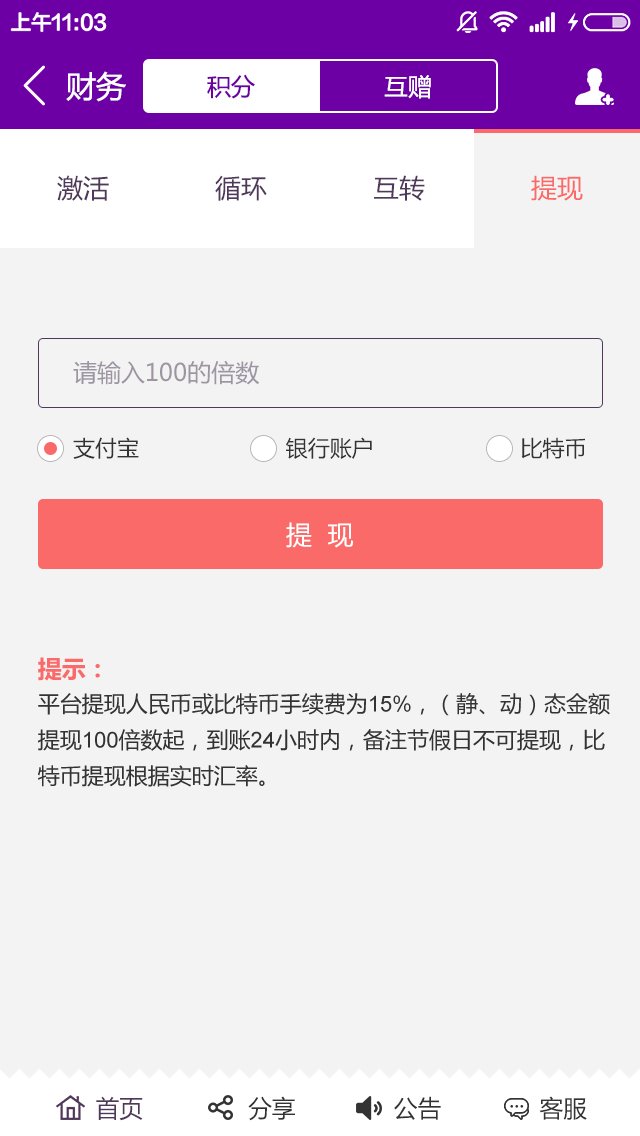
<style>
.page{position:relative;width:640px;height:1136px;background:#f3f3f3}
.page>*{position:absolute;margin:0}
.t1{font:30px "MicrosoftYaHei";color:#ffffff}
.t2{font:24px "MicrosoftYaHei";color:#6d00a5}
.t3{font:24px "MicrosoftYaHei";color:#ffffff}
.t4{font:26px "MicrosoftYaHei";color:#50385b}
.t5{font:26px "MicrosoftYaHei";color:#f96a69}
.t6{font:24px "MicrosoftYaHei";color:#9e95a2}
.t7{font:22px "MicrosoftYaHei";color:#333333}
.t8{font:26px "MicrosoftYaHei";color:#ffffff}
.t9{font:22px/36px "MicrosoftYaHei";color:#333333}
.t10{font:24px/36px "Î¢ÈíÑÅºÚ83¹«ÉçÌØ±ð°æ\BBS.83GS.CN-B";color:#f96a69}
.t11{font:22px/36px "ArialMT";color:#333333}
.t12{font:24px "MicrosoftYaHei";color:#333333}
.t13{font:24px "MicrosoftYaHei";color:#50385b}
</style>
<div class="page">
<p class="t1" style="left:66px;top:71px;width:60px;height:31px">财务</p>
<p class="t2" style="left:207px;top:74px;width:48px;height:25px">积分</p>
<p class="t3" style="left:384px;top:75px;width:47px;height:24px">互赠</p>
<p class="t4" style="left:57px;top:175px;width:52px;height:26px">激活</p>
<p class="t4" style="left:215px;top:175px;width:52px;height:26px">循环</p>
<p class="t4" style="left:374px;top:175px;width:51px;height:26px">互转</p>
<p class="t5" style="left:531px;top:175px;width:52px;height:26px">提现</p>
<p class="t6" style="left:73px;top:360px;width:186px;height:25px">请输入100的倍数</p>
<p class="t7" style="left:73px;top:437px;width:512px;height:22px">支付宝                        银行账户                        比特币</p>
<p class="t8" style="left:286px;top:522px;width:68px;height:26px">提  现</p>
<p class="t9" style="left:38px;top:657px;width:572px;height:130px"><span class="t10">提示：<br></span>平台提现人民币或比特币手续费为<span class="t11">15%</span>，（静、动）态金额提现<span class="t11">100</span>倍数起，到账<span class="t11">24</span>小时内，备注节假日不可提现，比特币提现根据实时汇率。</p>
<p class="t12" style="left:96px;top:1096px;width:491px;height:25px"><span class="t13">首页</span>               分享              公告              客服</p>
</div>
